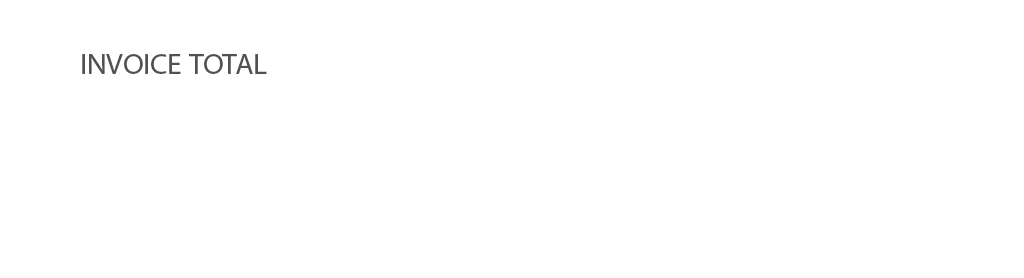
<style>
.page{position:relative;width:1024px;height:278px;background:#ffffff}
.page>*{position:absolute;margin:0}
.t1{font:41.7px "MyriadArabic-Regular";color:#4f5152}
</style>
<div class="page">
<p class="t1" style="left:82px;top:54px;width:185px;height:20px">INVOICE TOTAL</p>
</div>
